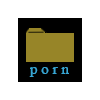
<style>
.page{position:relative;width:100px;height:100px;background:#ffffff}
.page>*{position:absolute;margin:0}
.t1{font:14.9px "TimesNewRomanPSMT";color:#37a6d4}
</style>
<div class="page">
<p class="t1" style="left:29px;top:67px;width:40px;height:10px">p o r n</p>
</div>
